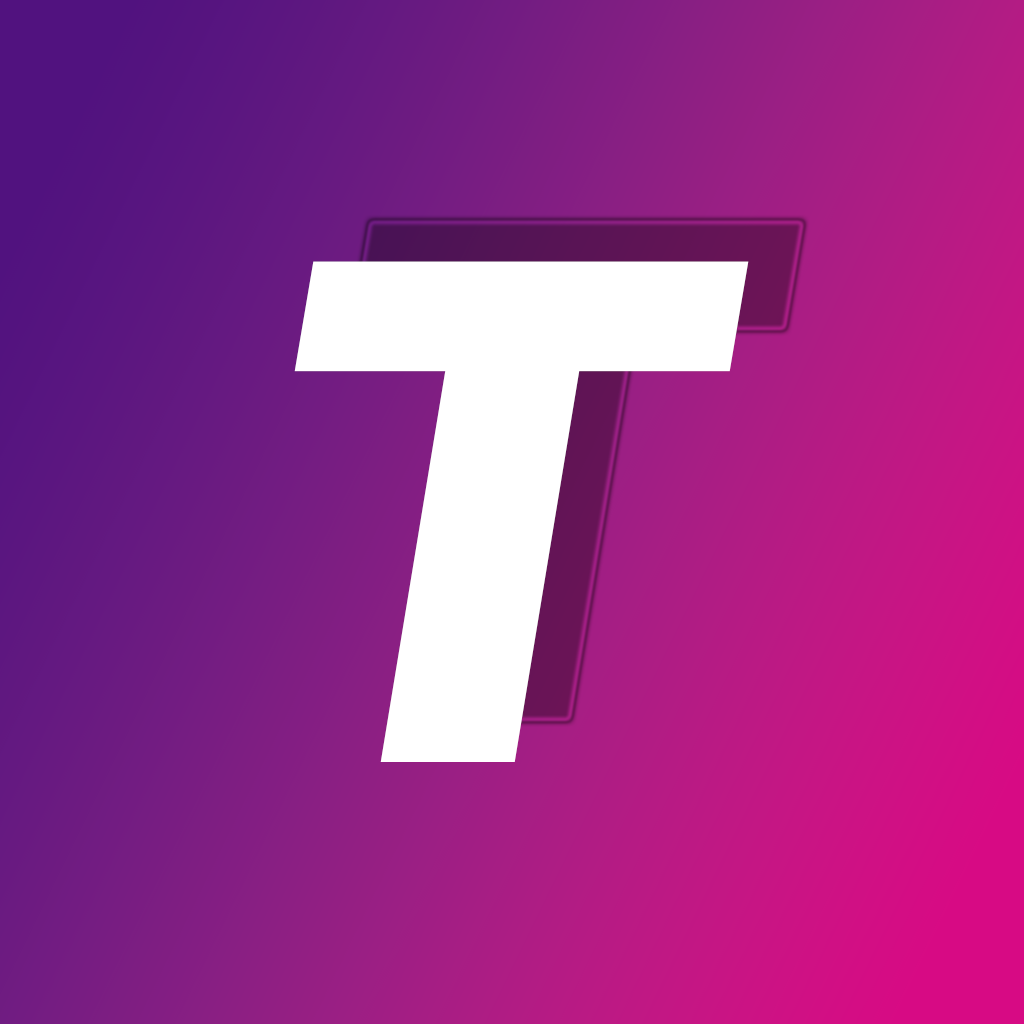
<style>
.page{position:relative;width:1024px;height:1024px}
.page>*{position:absolute;margin:0}
.t1{font:687.6px "Inter-BlackItalic";color:#ffffff}
</style>
<div class="page">
<p class="t1" style="left:294px;top:261px;width:455px;height:501px">T</p>
</div>
